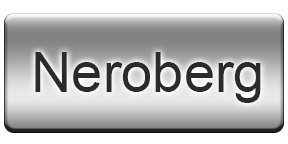
<style>
.page{position:relative;width:288px;height:144px;background:#ffffff}
.page>*{position:absolute;margin:0}
.t1{font:56px "ArialMT";color:#2b2b2b}
</style>
<div class="page">
<p class="t1" style="left:35px;top:52px;width:226px;height:51px">Neroberg</p>
</div>
